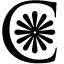
<style>
.page{position:relative;width:64px;height:64px;background:#ffffff}
.page>*{position:absolute;margin:0}
.t1{font:80.6px "TrajanPro-Regular";color:#000000}
</style>
<div class="page">
<p class="t1" style="left:2px;top:0px;width:55px;height:64px">C</p>
</div>
